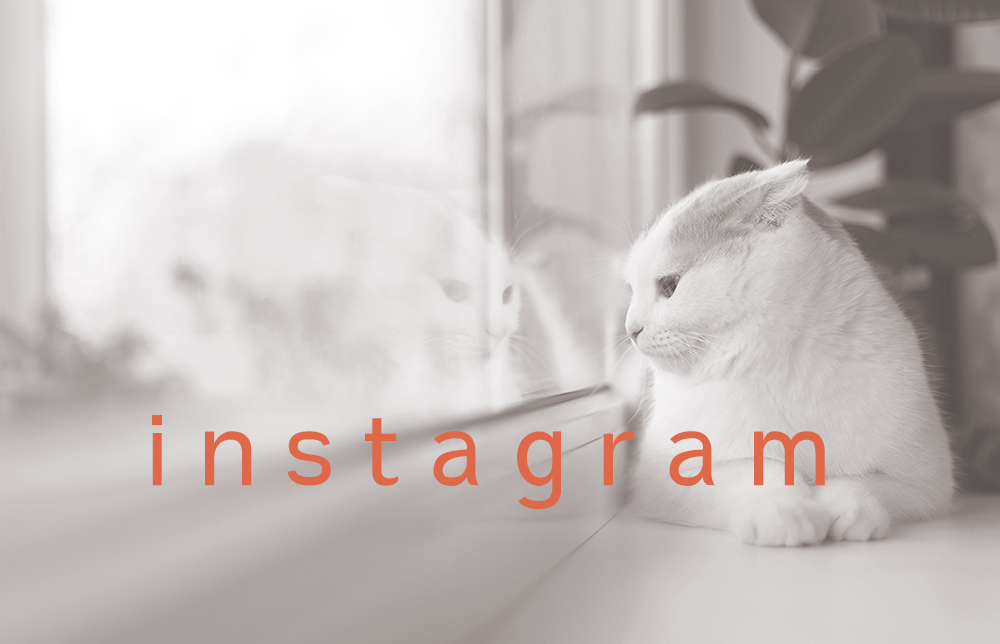
<style>
.page{position:relative;width:1000px;height:644px}
.page>*{position:absolute;margin:0}
.t1{font:100px "SawarabiGothic-Regular";letter-spacing:0.3em;color:#df6849}
</style>
<div class="page">
<p class="t1" style="left:152px;top:415px;width:673px;height:94px">instagram</p>
</div>
